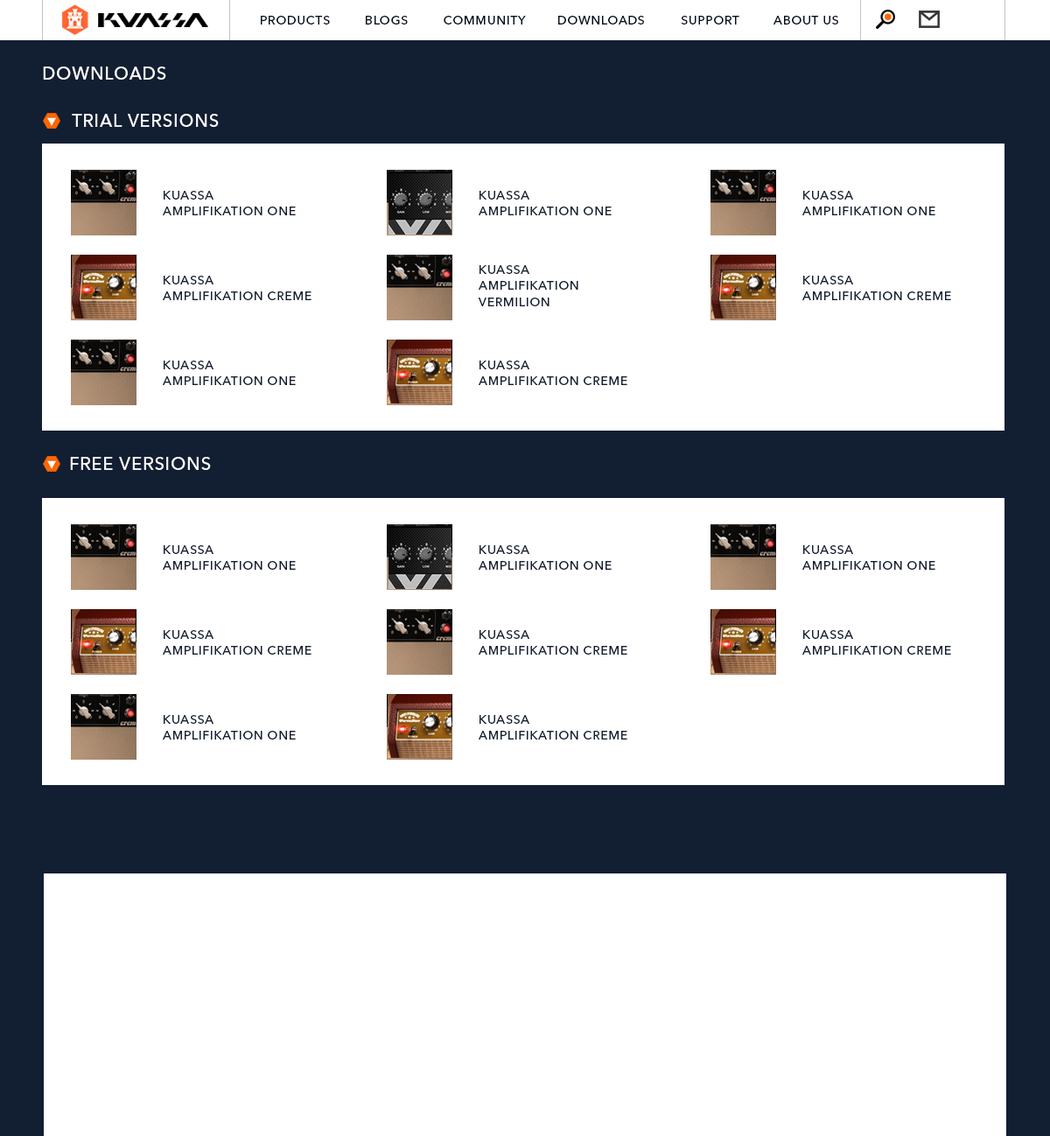
<style>
.page{position:relative;width:1050px;height:1136px;background:#ffffff}
.page>*{position:absolute;margin:0}
.t1{font:12.2px "AvenirNextLTPro-Medium";letter-spacing:0.05em;color:#010d1e}
.t2{font:17.5px "AvenirNextLTPro-Medium";letter-spacing:0.05em;color:#ffffff}
.t3{font:12.2px "AvenirNextLTPro-Medium";letter-spacing:0.05em;color:#121e32}
</style>
<div class="page">
<p class="t1" style="left:261px;top:16px;width:69px;height:8px">PRODUCTS</p>
<p class="t1" style="left:366px;top:16px;width:42px;height:8px">BLOGS</p>
<p class="t1" style="left:444px;top:16px;width:82px;height:8px">COMMUNITY</p>
<p class="t1" style="left:558px;top:16px;width:86px;height:8px">DOWNLOADS</p>
<p class="t1" style="left:681px;top:16px;width:58px;height:8px">SUPPORT</p>
<p class="t1" style="left:773px;top:16px;width:65px;height:8px">ABOUT US</p>
<p class="t2" style="left:43px;top:66px;width:123px;height:14px">DOWNLOADS</p>
<p class="t2" style="left:72px;top:114px;width:147px;height:13px">TRIAL VERSIONS</p>
<p class="t3" style="left:164px;top:191px;width:49px;height:8px">KUASSA</p>
<p class="t3" style="left:479px;top:191px;width:50px;height:8px">KUASSA</p>
<p class="t3" style="left:803px;top:191px;width:50px;height:8px">KUASSA</p>
<p class="t3" style="left:163px;top:206px;width:133px;height:9px">AMPLIFIKATION ONE</p>
<p class="t3" style="left:479px;top:206px;width:133px;height:9px">AMPLIFIKATION ONE</p>
<p class="t3" style="left:802px;top:206px;width:133px;height:9px">AMPLIFIKATION ONE</p>
<p class="t3" style="left:479px;top:265px;width:50px;height:9px">KUASSA</p>
<p class="t3" style="left:164px;top:276px;width:49px;height:8px">KUASSA</p>
<p class="t3" style="left:479px;top:281px;width:99px;height:9px">AMPLIFIKATION</p>
<p class="t3" style="left:803px;top:276px;width:50px;height:8px">KUASSA</p>
<p class="t3" style="left:163px;top:291px;width:148px;height:9px">AMPLIFIKATION CREME</p>
<p class="t3" style="left:802px;top:291px;width:149px;height:9px">AMPLIFIKATION CREME</p>
<p class="t3" style="left:478px;top:297px;width:71px;height:9px">VERMILION</p>
<p class="t3" style="left:164px;top:360px;width:49px;height:9px">KUASSA</p>
<p class="t3" style="left:479px;top:360px;width:50px;height:9px">KUASSA</p>
<p class="t3" style="left:163px;top:376px;width:133px;height:9px">AMPLIFIKATION ONE</p>
<p class="t3" style="left:479px;top:376px;width:148px;height:9px">AMPLIFIKATION CREME</p>
<p class="t2" style="left:70px;top:457px;width:141px;height:13px">FREE VERSIONS</p>
<p class="t3" style="left:164px;top:545px;width:49px;height:9px">KUASSA</p>
<p class="t3" style="left:479px;top:545px;width:50px;height:9px">KUASSA</p>
<p class="t3" style="left:803px;top:545px;width:50px;height:9px">KUASSA</p>
<p class="t3" style="left:163px;top:561px;width:133px;height:9px">AMPLIFIKATION ONE</p>
<p class="t3" style="left:479px;top:561px;width:133px;height:9px">AMPLIFIKATION ONE</p>
<p class="t3" style="left:802px;top:561px;width:133px;height:9px">AMPLIFIKATION ONE</p>
<p class="t3" style="left:164px;top:630px;width:49px;height:9px">KUASSA</p>
<p class="t3" style="left:479px;top:630px;width:50px;height:9px">KUASSA</p>
<p class="t3" style="left:803px;top:630px;width:50px;height:9px">KUASSA</p>
<p class="t3" style="left:163px;top:646px;width:148px;height:8px">AMPLIFIKATION CREME</p>
<p class="t3" style="left:479px;top:646px;width:148px;height:8px">AMPLIFIKATION CREME</p>
<p class="t3" style="left:802px;top:646px;width:149px;height:8px">AMPLIFIKATION CREME</p>
<p class="t3" style="left:164px;top:715px;width:49px;height:9px">KUASSA</p>
<p class="t3" style="left:479px;top:715px;width:50px;height:9px">KUASSA</p>
<p class="t3" style="left:163px;top:731px;width:133px;height:8px">AMPLIFIKATION ONE</p>
<p class="t3" style="left:479px;top:731px;width:148px;height:8px">AMPLIFIKATION CREME</p>
</div>
